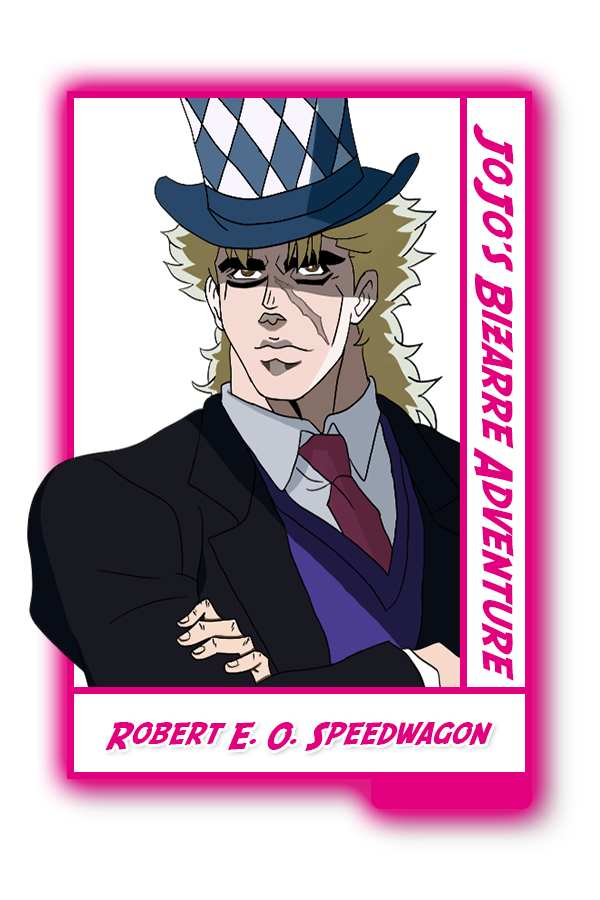
<style>
.page{position:relative;width:600px;height:900px;background:#ffffff}
.page>*{position:absolute;margin:0}
.t1{font:42.4px "SFFedora";color:#e3007e}
.t2{font:30.8px "SFFedora";color:#e3007e}
</style>
<div class="page">
<p class="t1" style="left:473px;top:123px;width:41px;height:558px;rotate:90deg">JoJo's Bizarre Adventure</p>
<p class="t2" style="left:105px;top:722px;width:388px;height:29px">Robert E. O. Speedwagon</p>
</div>
